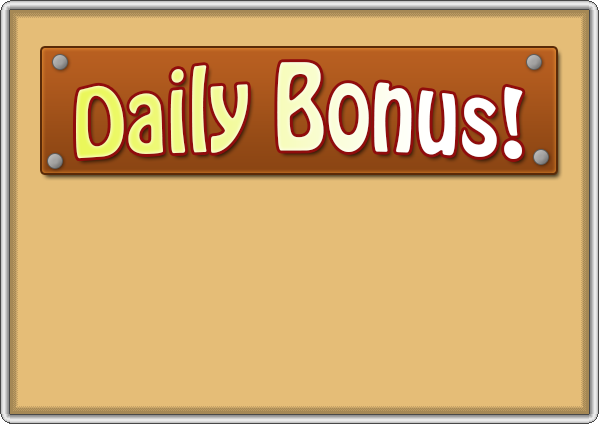
<style>
.page{position:relative;width:599px;height:424px;background:#e5bd77}
.page>*{position:absolute;margin:0}
.t1{font:80px "HoboStd"}
</style>
<div class="page">
<p class="t1" style="left:76px;top:62px;width:447px;height:97px">Daily Bonus!</p>
</div>
